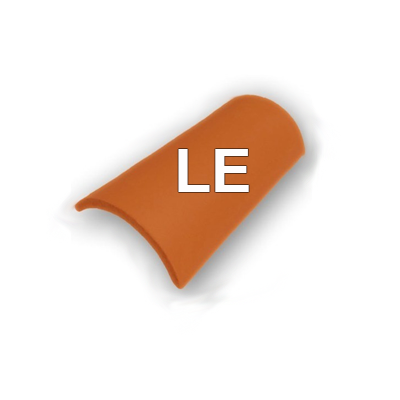
<style>
.page{position:relative;width:400px;height:400px;background:#ffffff}
.page>*{position:absolute;margin:0}
.t1{font:59.9px "Arial-BoldMT";color:#fefdfd}
</style>
<div class="page">
<p class="t1" style="left:178px;top:149px;width:71px;height:43px">LE</p>
</div>
